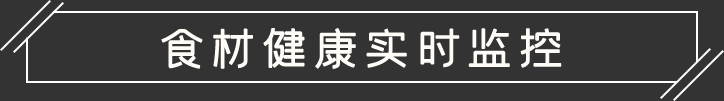
<style>
.page{position:relative;width:724px;height:101px;background:#333333}
.page>*{position:absolute;margin:0}
.t1{font:50px "zihun58hao-chuangzhonghei";color:#fffcf7;font-weight:bold}
</style>
<div class="page">
<p class="t1" style="left:161px;top:28px;width:401px;height:41px">食材健康实时监控</p>
</div>
